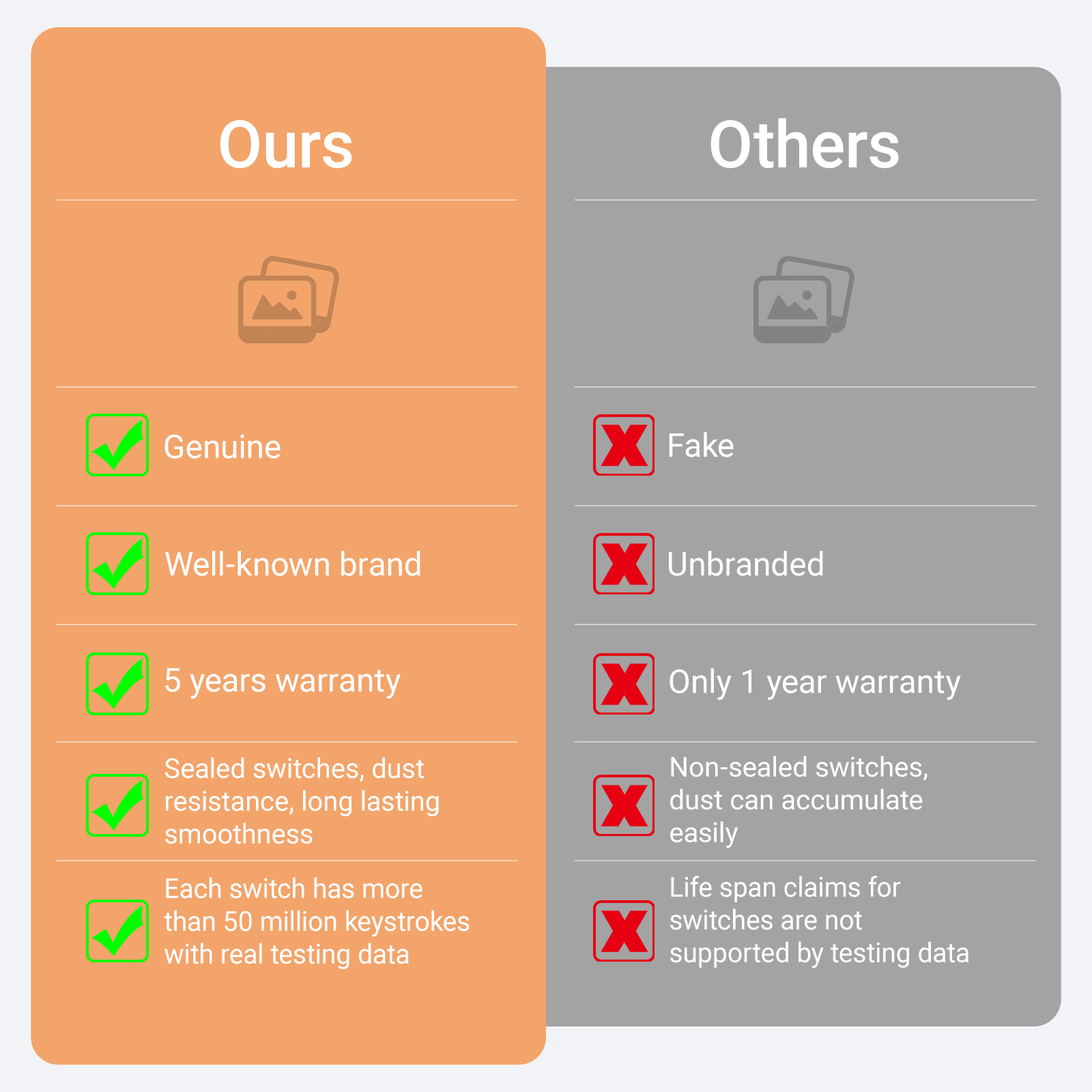
<style>
.page{position:relative;width:1092px;height:1092px;background:#f2a46a}
.page>*{position:absolute;margin:0}
.t1{font:65.5px "Roboto-Medium";color:#fefffe}
.t2{font:65.5px "Roboto-Medium";color:#ffffff}
.t3{font:32.8px "Roboto-Regular";color:#ffffff}
.t4{font:27.3px/32.8px "Roboto-Regular";color:#ffffff}
</style>
<div class="page">
<p class="t1" style="left:220px;top:120px;width:132px;height:49px">Ours</p>
<p class="t2" style="left:710px;top:118px;width:189px;height:51px">Others</p>
<p class="t3" style="left:164px;top:434px;width:117px;height:25px">Genuine</p>
<p class="t3" style="left:669px;top:432px;width:65px;height:25px">Fake</p>
<p class="t3" style="left:165px;top:551px;width:255px;height:25px">Well-known brand</p>
<p class="t3" style="left:669px;top:551px;width:154px;height:25px">Unbranded</p>
<p class="t3" style="left:165px;top:668px;width:236px;height:31px">5 years warranty</p>
<p class="t3" style="left:670px;top:668px;width:291px;height:32px">Only 1 year warranty</p>
<p class="t4" style="left:164px;top:757px;width:275px;height:87px">Sealed switches, dust resistance, long lasting smoothness</p>
<p class="t4" style="left:670px;top:756px;width:258px;height:92px">Non-sealed switches, dust can accumulate easily</p>
<p class="t4" style="left:164px;top:877px;width:306px;height:92px">Each switch has more than 50 million keystrokes with real testing data</p>
<p class="t4" style="left:670px;top:876px;width:299px;height:92px">Life span claims for switches are not supported by testing data</p>
</div>
